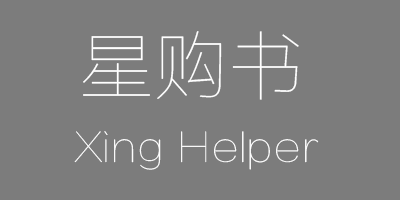
<style>
.page{position:relative;width:400px;height:200px;background:#7c7c7c}
.page>*{position:absolute;margin:0}
.t1{font:75px "FZLTCXHJW--GB1-0";color:#ffffff}
.t2{font:9.7px "FZLTCXHJW--GB1-0";color:#ffffff;scale:1.06 1}
</style>
<div class="page">
<p class="t1" style="left:83px;top:31px;width:216px;height:69px">星购书</p>
<p class="t2" style="left:74px;top:131px;width:245px;height:39px">Xing Helper</p>
</div>
